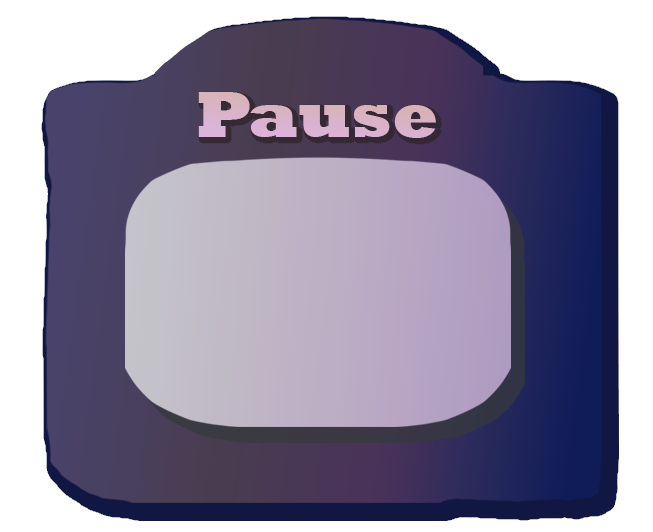
<style>
.page{position:relative;width:653px;height:532px;background:#ffffff}
.page>*{position:absolute;margin:0}
.t1{font:66.7px "Rockwell-ExtraBold";color:#d9b3c8}
</style>
<div class="page">
<p class="t1" style="left:198px;top:92px;width:238px;height:46px">Pause</p>
</div>
